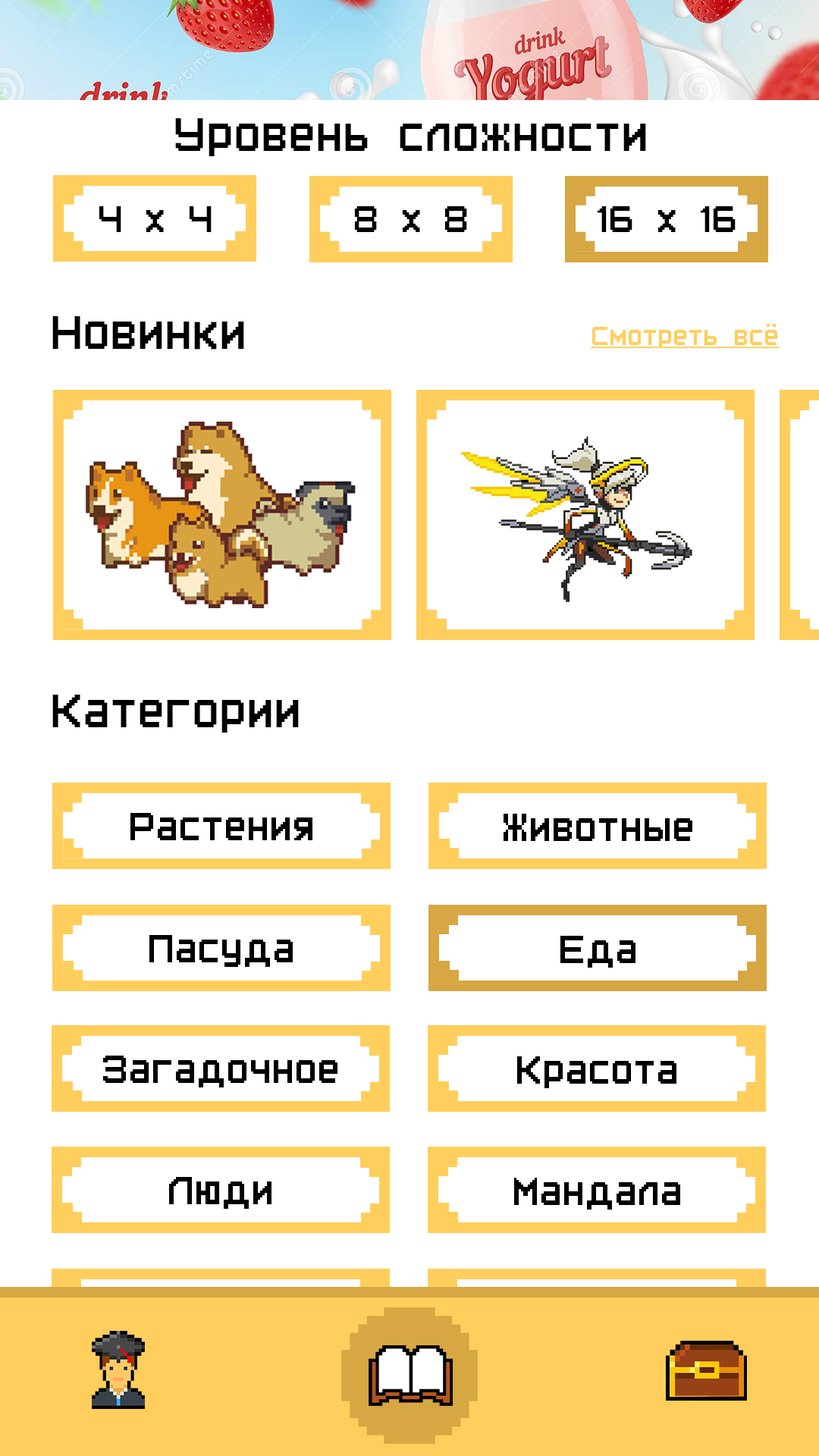
<style>
.page{position:relative;width:819px;height:1456px;background:#ffffff}
.page>*{position:absolute;margin:0}
.t1{font:54.6px "PixelFont-7";color:#000000}
.t2{font:42.9px "PixelFont-7";color:#000000}
.t3{font:30.3px "PixelFont-7";color:#ffce5c;text-decoration:underline}
.t4{font:45.5px "PixelFont-7";color:#000000}
</style>
<div class="page">
<p class="t1" style="left:175px;top:118px;width:471px;height:38px">Уровень сложности</p>
<p class="t2" style="left:99px;top:206px;width:113px;height:26px">4 х 4</p>
<p class="t2" style="left:354px;top:206px;width:113px;height:26px">8 х 8</p>
<p class="t2" style="left:597px;top:206px;width:139px;height:26px">16 х 16</p>
<p class="t1" style="left:52px;top:316px;width:192px;height:34px">Новинки</p>
<p class="t3" style="left:591px;top:324px;width:189px;height:25px">Смотреть всё</p>
<p class="t1" style="left:52px;top:695px;width:247px;height:38px">Категории</p>
<p class="t4" style="left:130px;top:813px;width:182px;height:27px">Растения</p>
<p class="t4" style="left:504px;top:814px;width:188px;height:27px">Животные</p>
<p class="t4" style="left:149px;top:935px;width:144px;height:32px">Пасуда</p>
<p class="t4" style="left:560px;top:936px;width:75px;height:32px">Еда</p>
<p class="t4" style="left:103px;top:1056px;width:234px;height:31px">Загадочное</p>
<p class="t4" style="left:517px;top:1056px;width:159px;height:32px">Красота</p>
<p class="t4" style="left:169px;top:1177px;width:102px;height:32px">Люди</p>
<p class="t4" style="left:514px;top:1178px;width:166px;height:32px">Мандала</p>
</div>
